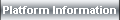
<style>
.page{position:relative;width:120px;height:20px}
.page>*{position:absolute;margin:0}
.t1{font:11px "Arial-BoldMT";color:#ffffff}
</style>
<div class="page">
<p class="t1" style="left:3px;top:6px;width:113px;height:8px">Platform Information</p>
</div>
